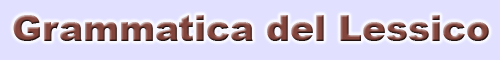
<style>
.page{position:relative;width:500px;height:60px;background:#e1e1ff}
.page>*{position:absolute;margin:0}
.t1{font:36px "Arial-Black"}
</style>
<div class="page">
<p class="t1" style="left:13px;top:15px;width:476px;height:26px">Grammatica del Lessico</p>
</div>
